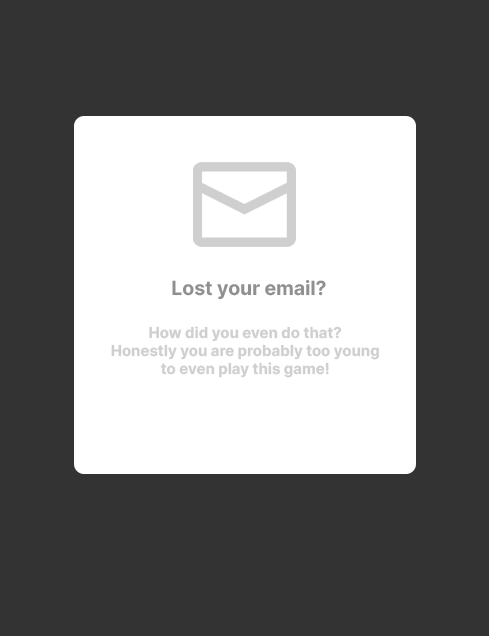
<style>
.page{position:relative;width:489px;height:636px;background:#333333}
.page>*{position:absolute;margin:0}
.t1{font:19.4px "Inter-Bold";color:#909090}
.t2{font:15px "Inter-Bold";color:#cfcfcf}
</style>
<div class="page">
<p class="t1" style="left:172px;top:279px;width:154px;height:21px">Lost your email?</p>
<p class="t2" style="left:111px;top:326px;width:268px;height:52px;text-align:center">How did you even do that?<br>Honestly you are probably too young<br>to even play this game!</p>
</div>
